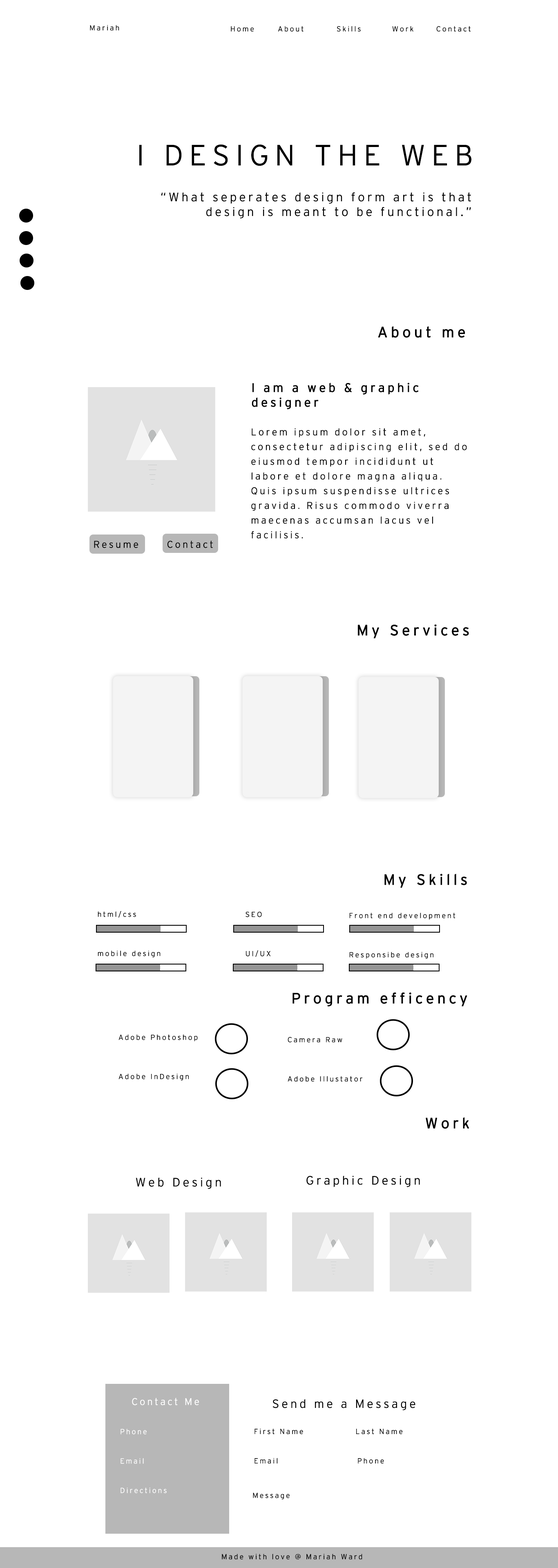
<style>
.page{position:relative;width:558px;height:1568px;background:#ffffff}
.page>*{position:absolute;margin:0}
.t1{font:7.3px "Interstate-Light";letter-spacing:0.2em;color:#000000}
.t2{font:29.4px "Interstate-Light";letter-spacing:0.2em;color:#000000;text-transform:uppercase}
.t3{font:12.2px "Interstate-Light";letter-spacing:0.2em;color:#000000}
.t4{font:14.7px "Interstate-Light";letter-spacing:0.2em;color:#000000;font-weight:bold}
.t5{font:12.2px/14.7px "Interstate-Light";letter-spacing:0.2em;color:#000000;font-weight:bold}
.t6{font:9.8px/14.7px "Interstate-Light";letter-spacing:0.2em;color:#000000}
.t7{font:9.8px "Interstate-Light";letter-spacing:0.2em;color:#000000}
.t8{font:7.3px/9.8px "Interstate-Light";letter-spacing:0.2em;color:#000000}
.t9{font:9.8px "Interstate-Light";letter-spacing:0.2em;color:#ffffff}
.t10{font:11.9px "Interstate-Light";letter-spacing:0.2em;color:#000000}
.t11{font:7.3px/9.8px "Interstate-Light";letter-spacing:0.2em;color:#ffffff}
</style>
<div class="page">
<p class="t1" style="left:90px;top:25px;width:29px;height:6px">Mariah</p>
<p class="t1" style="left:231px;top:26px;width:239px;height:6px">Home   About   Skills   Work   Contact</p>
<p class="t2" style="left:139px;top:145px;width:332px;height:21px">I design the web</p>
<p class="t3" style="left:161px;top:192px;width:310px;height:26px;text-align:right">“What seperates design form art is that design is meant to be functional.”</p>
<p class="t4" style="left:378px;top:326px;width:87px;height:12px">About me</p>
<p class="t5" style="left:252px;top:383px;width:167px;height:27px">I am a web &amp; graphic <br>designer</p>
<p class="t6" style="left:251px;top:428px;width:216px;height:111px">Lorem ipsum dolor sit amet, consectetur adipiscing elit, sed do eiusmod tempor incididunt ut labore et dolore magna aliqua. Quis ipsum suspendisse ultrices gravida. Risus commodo viverra maecenas accumsan lacus vel facilisis.</p>
<p class="t7" style="left:94px;top:541px;width:119px;height:7px">Resume   Contact</p>
<p class="t4" style="left:358px;top:624px;width:111px;height:15px">My Services</p>
<p class="t4" style="left:384px;top:874px;width:83px;height:14px">My Skills</p>
<p class="t8" style="left:98px;top:911px;width:62px;height:47px">html/css<br><br><br><br>mobile design</p>
<p class="t8" style="left:245px;top:911px;width:26px;height:46px">SEO<br><br><br><br>UI/UX</p>
<p class="t8" style="left:349px;top:913px;width:106px;height:46px">Front end development<br><br><br><br>Responsibe design</p>
<p class="t4" style="left:292px;top:992px;width:175px;height:15px">Program efficency</p>
<p class="t8" style="left:118px;top:1034px;width:80px;height:47px">Adobe Photoshop<br><br><br><br>Adobe InDesign</p>
<p class="t8" style="left:287px;top:1037px;width:76px;height:45px">Camera Raw<br><br><br><br>Adobe Illustator</p>
<p class="t4" style="left:425px;top:1117px;width:44px;height:12px">Work</p>
<p class="t3" style="left:136px;top:1177px;width:85px;height:12px">Web Design</p>
<p class="t3" style="left:306px;top:1176px;width:114px;height:11px">Graphic Design</p>
<p class="t9" style="left:132px;top:1398px;width:67px;height:7px">Contact Me</p>
<p class="t10" style="left:272px;top:1399px;width:143px;height:11px">Send me a Message</p>
<p class="t11" style="left:120px;top:1429px;width:47px;height:64px">Phone <br><br><br>Email<br><br><br>Directions</p>
<p class="t8" style="left:254px;top:1428px;width:149px;height:36px">First Name               Last Name<br><br><br>Email                       Phone</p>
<p class="t1" style="left:253px;top:1492px;width:37px;height:7px">Message</p>
<p class="t1" style="left:222px;top:1554px;width:140px;height:5px">Made with love @ Mariah Ward</p>
</div>
